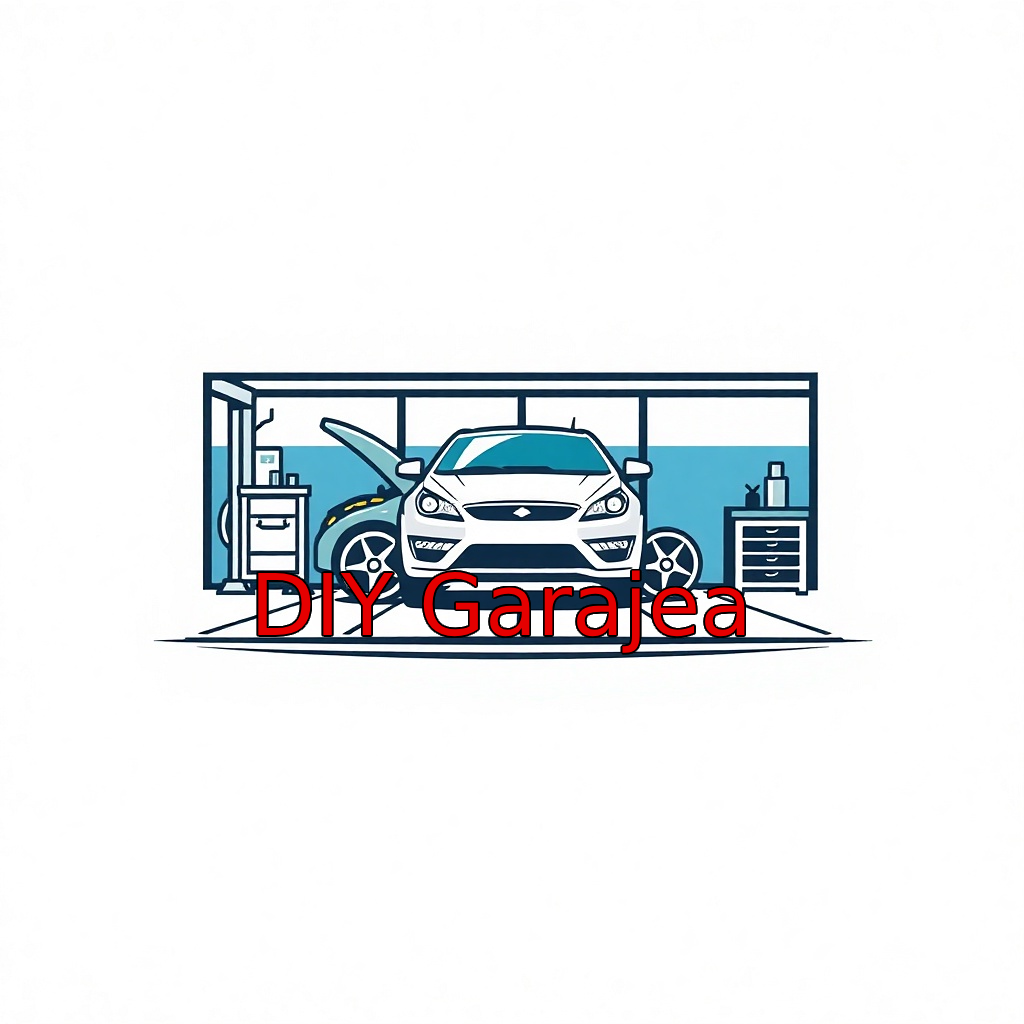
<style>
.page{position:relative;width:1024px;height:1024px;background:#ffffff}
.page>*{position:absolute;margin:0}
.t1{font:85px "DejaVuSans";color:#e50000}
</style>
<div class="page">
<p class="t1" style="left:258px;top:570px;width:487px;height:83px">DIY Garajea</p>
</div>
